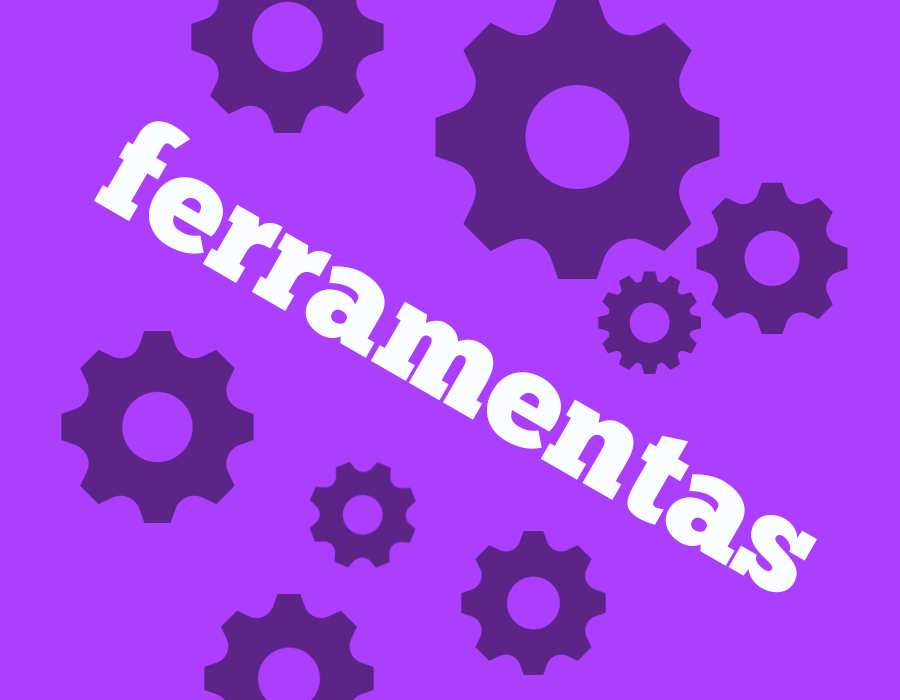
<style>
.page{position:relative;width:900px;height:700px;background:#ac3ffe}
.page>*{position:absolute;margin:0}
.t1{font:136.2px "ChunkFive-Roman";color:#f9fdff}
</style>
<div class="page">
<p class="t1" style="left:94px;top:121px;width:723px;height:472px;rotate:30deg">ferramentas</p>
</div>
